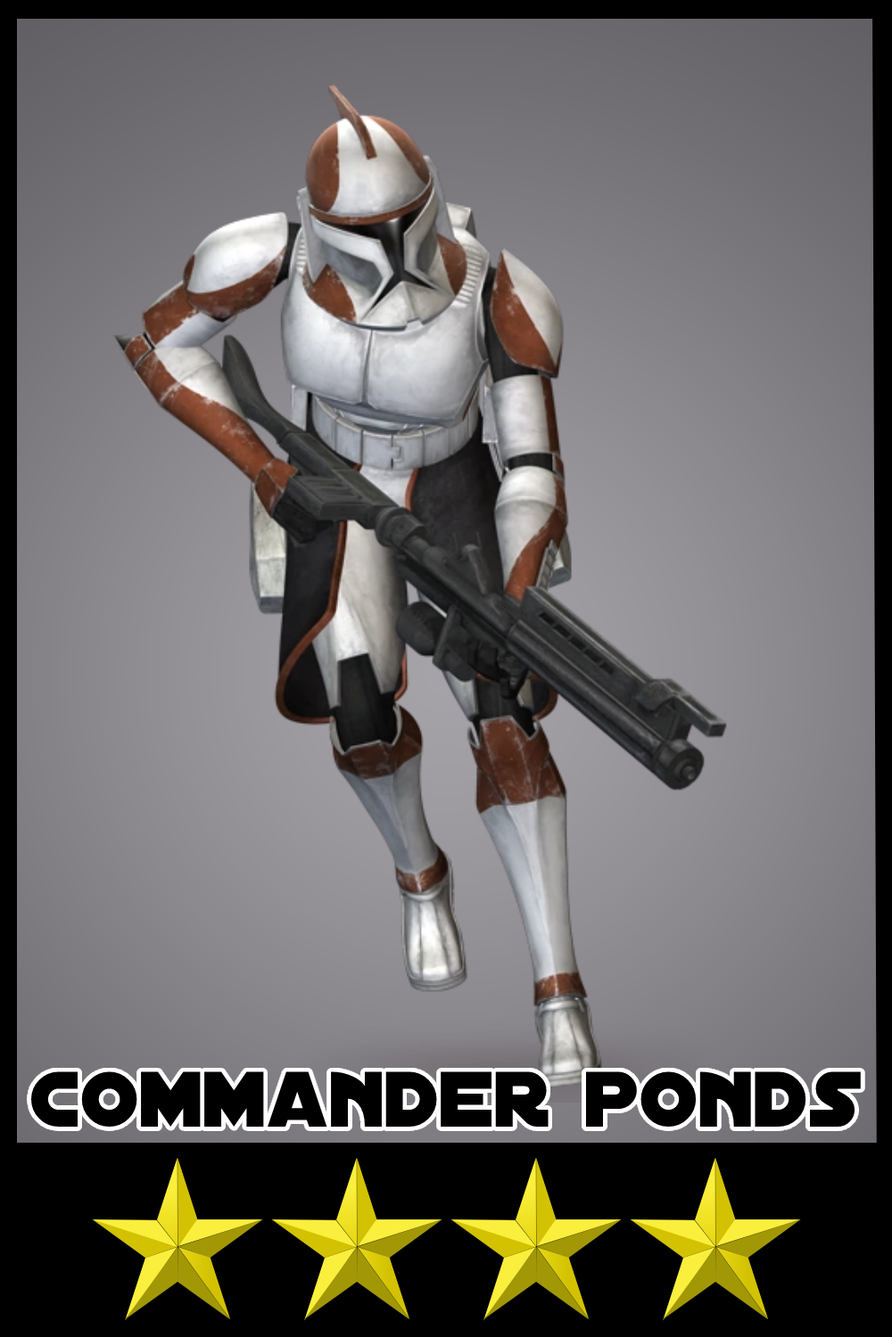
<style>
.page{position:relative;width:892px;height:1337px}
.page>*{position:absolute;margin:0}
.t1{font:84.4px "DistantGalaxy";color:#000000}
</style>
<div class="page">
<p class="t1" style="left:31px;top:1072px;width:829px;height:55px">commander ponds</p>
</div>
